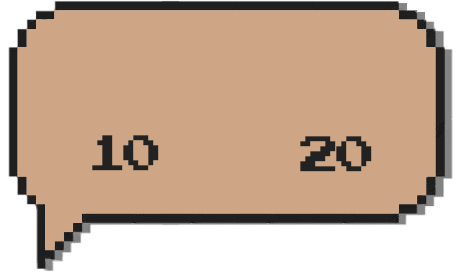
<style>
.page{position:relative;width:460px;height:272px;background:#cfa685}
.page>*{position:absolute;margin:0}
.t1{font:40px "PressStart2P-Regular";letter-spacing:-0.1em;color:#222222}
</style>
<div class="page">
<p class="t1" style="left:92px;top:135px;width:67px;height:36px">10</p>
<p class="t1" style="left:300px;top:136px;width:72px;height:36px">20</p>
</div>
